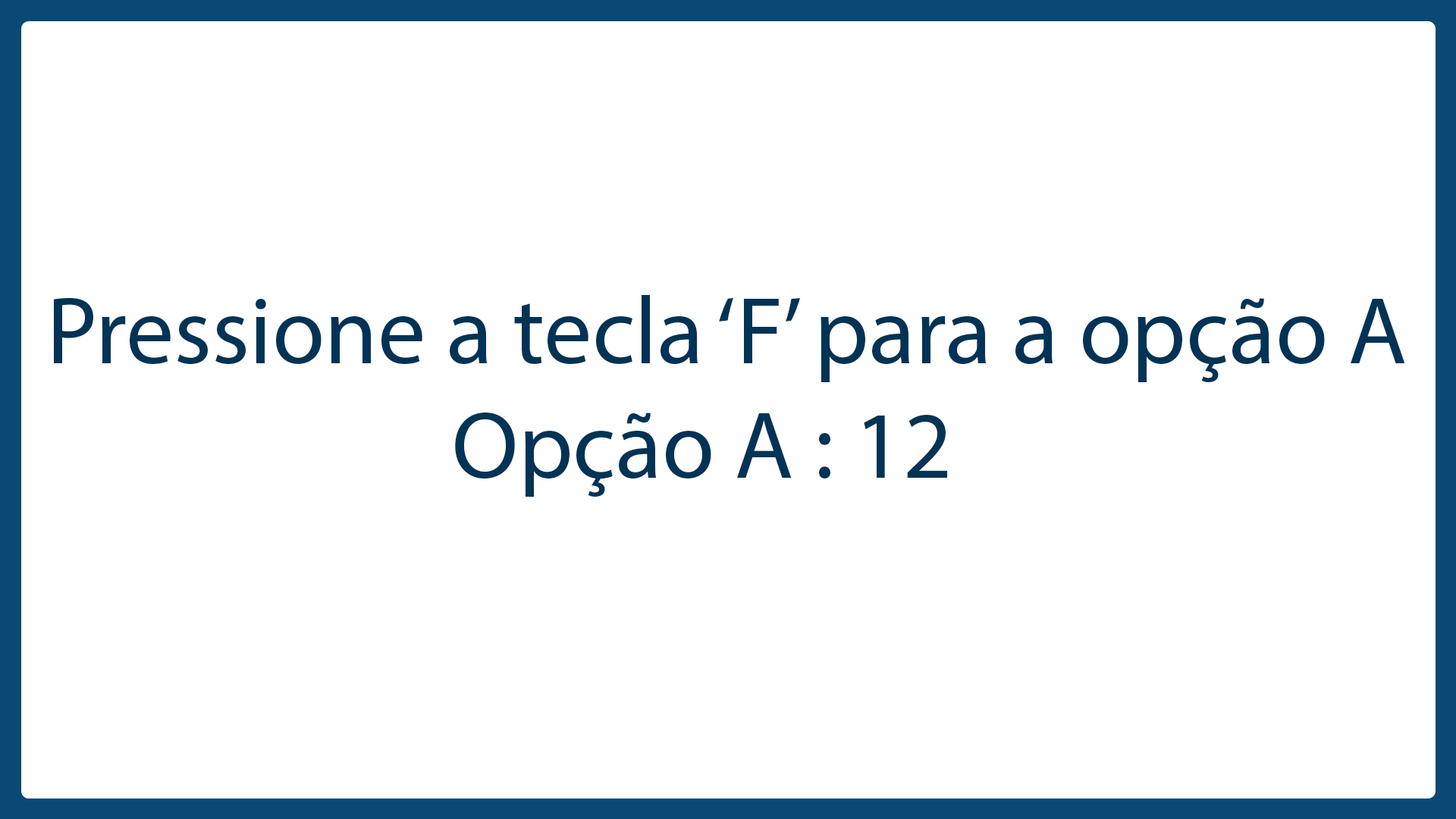
<style>
.page{position:relative;width:1456px;height:819px;background:#ffffff}
.page>*{position:absolute;margin:0}
.t1{font:95.9px "MyriadPro-Regular";color:#003355}
</style>
<div class="page">
<p class="t1" style="left:54px;top:295px;width:1351px;height:202px">Pressione a tecla ‘F’ para a opção A<br>                    Opção A : 12</p>
</div>
